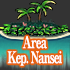
<style>
.page{position:relative;width:70px;height:70px;background:#333333}
.page>*{position:absolute;margin:0}
.t1{font:16px/15px "RyuminPro-ExBold";letter-spacing:-0.08em;color:#ffffff;scale:0.7 1}
</style>
<div class="page">
<p class="t1" style="left:7px;top:36px;width:55px;height:30px;text-align:center">Area<br>Kep. Nansei</p>
</div>
